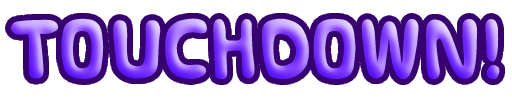
<style>
.page{position:relative;width:512px;height:100px;background:#ffffff}
.page>*{position:absolute;margin:0}
.t1{font:60px "Vanilla"}
</style>
<div class="page">
<p class="t1" style="left:11px;top:18px;width:489px;height:63px">TOUCHDOWN!</p>
</div>
